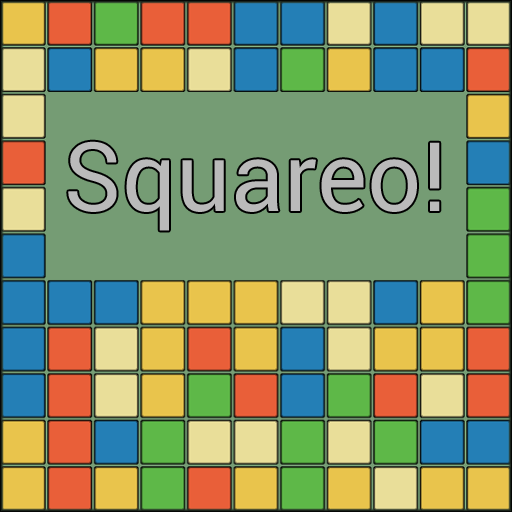
<style>
.page{position:relative;width:512px;height:512px;background:#759c74}
.page>*{position:absolute;margin:0}
.t1{font:96px "Roboto-Regular";color:#bababa}
</style>
<div class="page">
<p class="t1" style="left:68px;top:141px;width:372px;height:90px">Squareo!</p>
</div>
